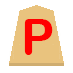
<style>
.page{position:relative;width:73px;height:73px;background:#ffffff}
.page>*{position:absolute;margin:0}
.t1{font:50px "ArialRoundedMTBold";color:#ff0000}
</style>
<div class="page">
<p class="t1" style="left:24px;top:19px;width:29px;height:36px">P</p>
</div>
